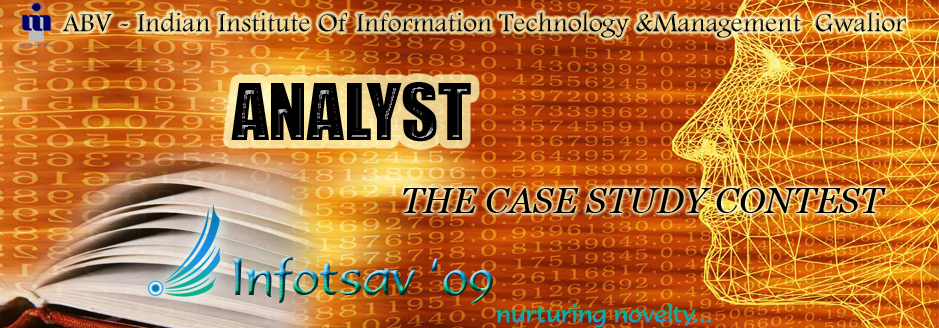
<style>
.page{position:relative;width:939px;height:328px}
.page>*{position:absolute;margin:0}
.t1{font:27.7px "FootlightMTLight";color:#000000}
.t2{font:72px "Impact";color:#000000}
.t3{font:36.4px "Georgia-Italic";color:#000000}
.t4{font:50.4px "Formal436BT-Regular";scale:0.94 1}
.t5{font:23.8px "Formal436BT-Regular"}
</style>
<div class="page">
<p class="t1" style="left:62px;top:12px;width:844px;height:26px">ABV - Indian Institute Of Information Technology &amp;Management  Gwalior</p>
<p class="t2" style="left:231px;top:82px;width:240px;height:60px">ANALYST</p>
<p class="t3" style="left:403px;top:188px;width:483px;height:25px">THE CASE STUDY CONTEST</p>
<p class="t4" style="left:231px;top:257px;width:262px;height:47px">Infotsav ‘09</p>
<p class="t5" style="left:496px;top:303px;width:216px;height:25px">nurturing novelty...</p>
</div>
